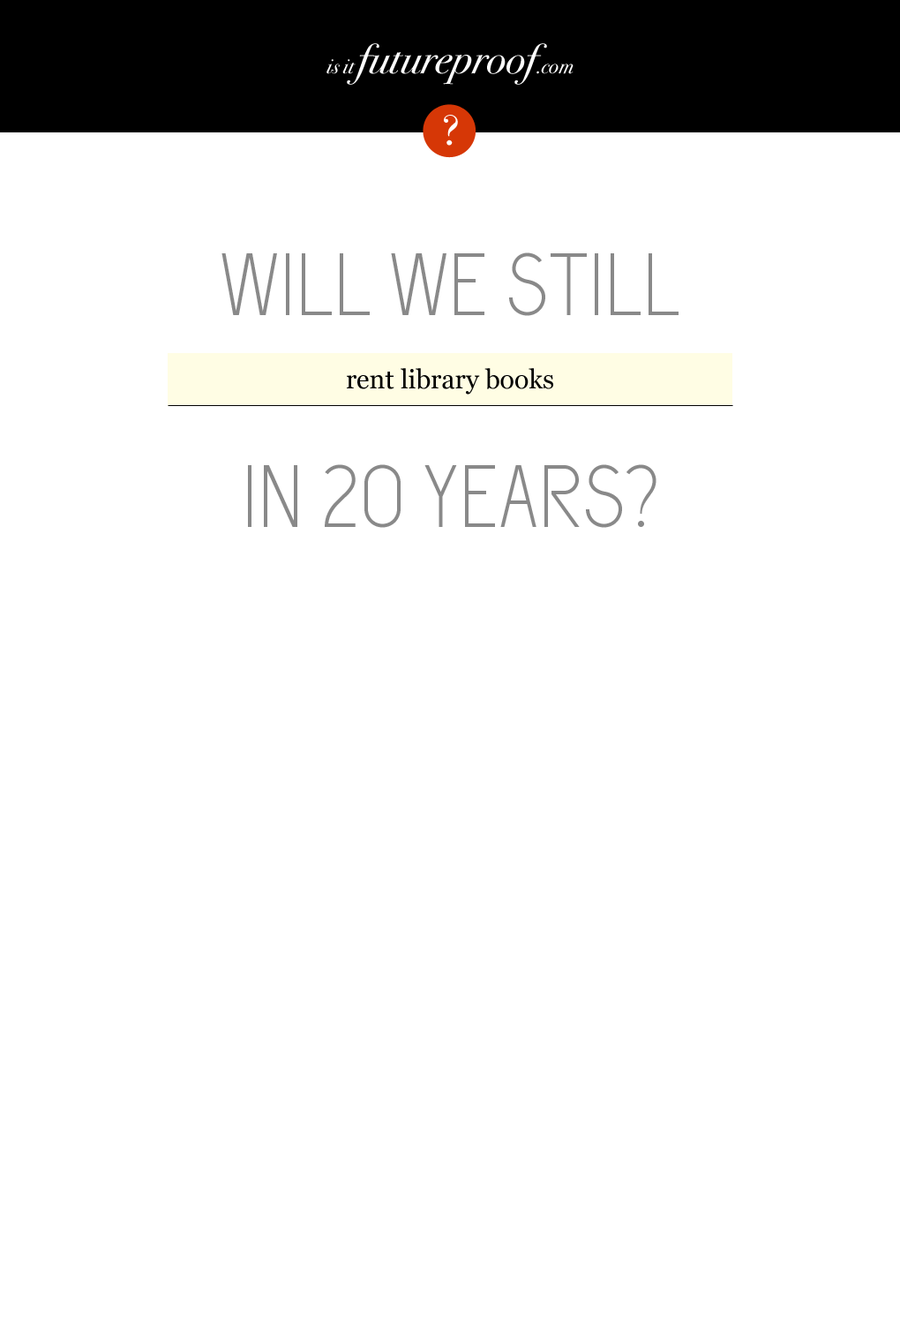
<style>
.page{position:relative;width:900px;height:1324px;background:#ffffff}
.page>*{position:absolute;margin:0}
.t1{font:42.4px "BodoniSvtyTwoITCTTBookIta";color:#ffffff}
.t2{font:21.2px "BodoniSvtyTwoITCTTBookIta";color:#ffffff}
.t3{font:44.1px "Bodoni-Book";letter-spacing:0.05em;color:#ffffff}
.t4{font:88.3px "Capsuula";color:#898989;text-transform:uppercase}
.t5{font:26.5px "Georgia";color:#000000}
</style>
<div class="page">
<p class="t1" style="left:327px;top:43px;width:247px;height:42px"><span class="t2">is it </span>futureproof<span class="t2">.com</span></p>
<p class="t3" style="left:444px;top:115px;width:14px;height:31px">?</p>
<p class="t4" style="left:222px;top:252px;width:457px;height:276px;text-align:center">Will we still<br><br>in 20 years?</p>
<p class="t5" style="left:347px;top:368px;width:207px;height:27px">rent library books</p>
</div>
